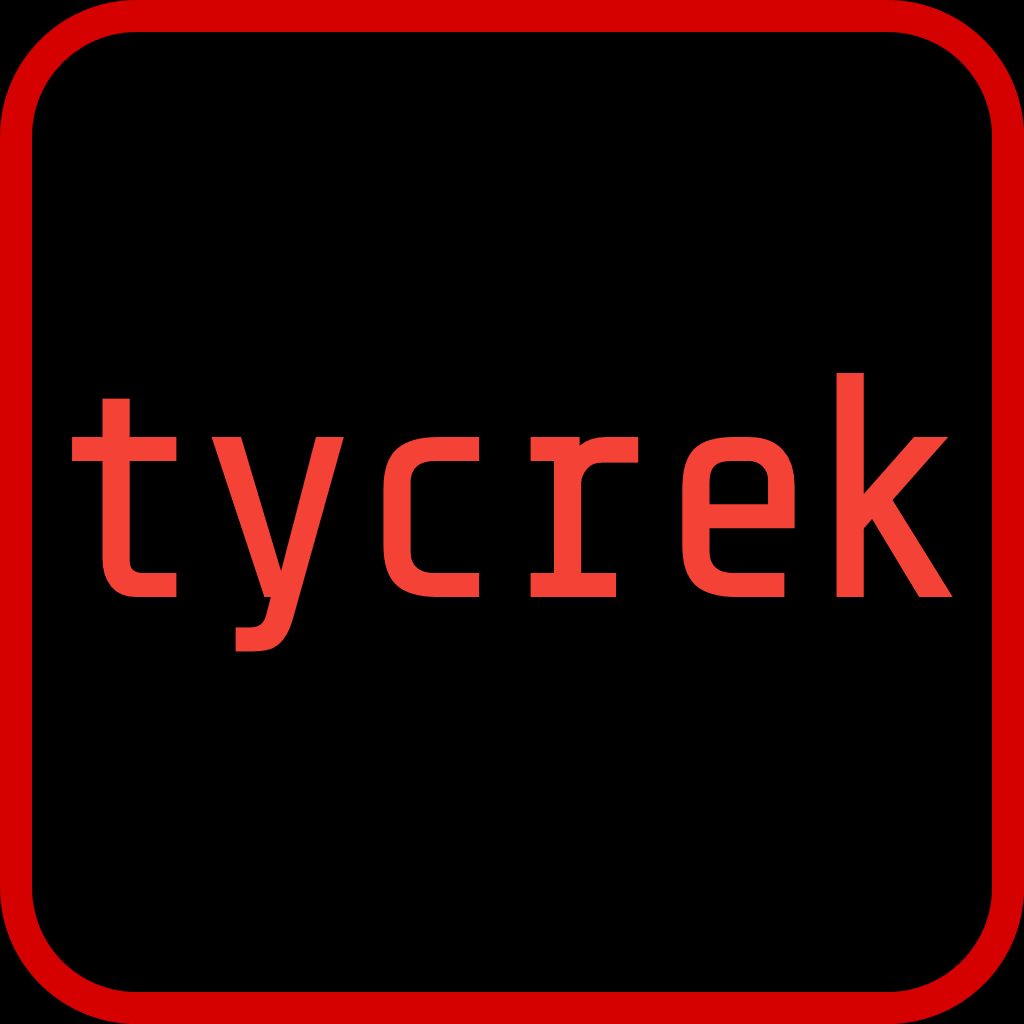
<style>
.page{position:relative;width:1024px;height:1024px;background:#000000}
.page>*{position:absolute;margin:0}
.t1{font:320px "ShareTechMono-Regular";letter-spacing:-0.06em;color:#f44336}
</style>
<div class="page">
<p class="t1" style="left:72px;top:372px;width:881px;height:280px">tycrek</p>
</div>
